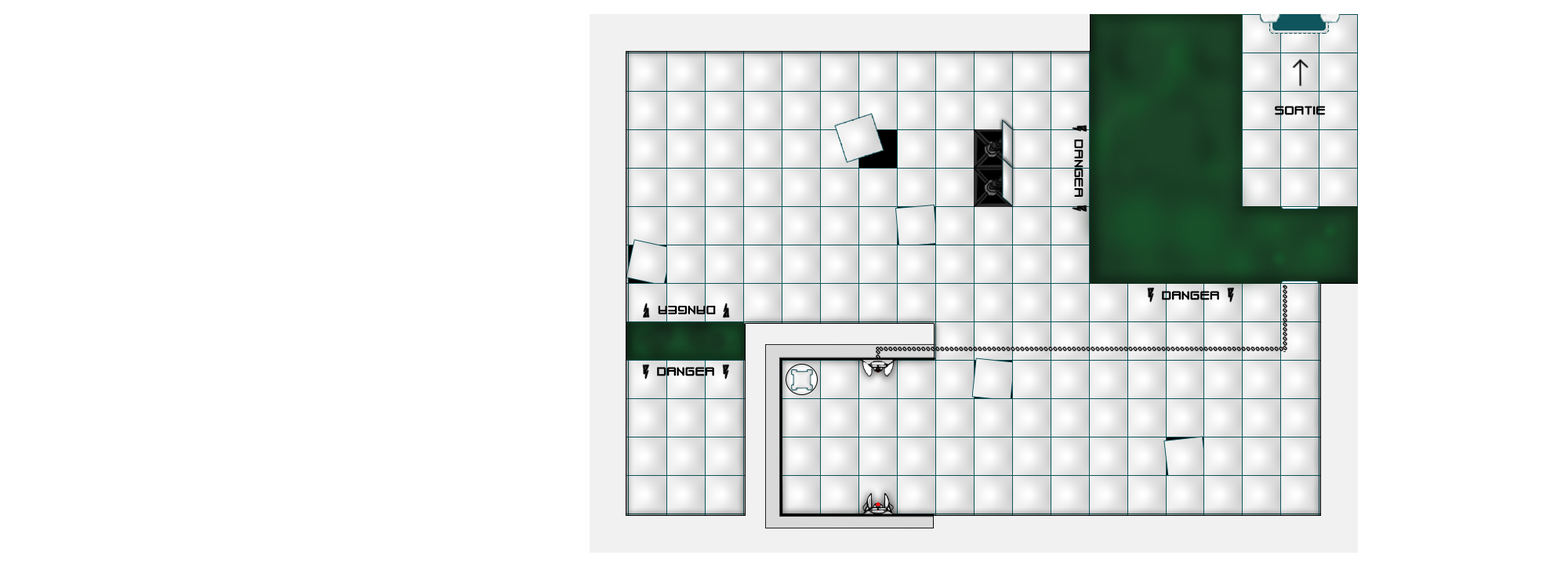
<style>
.page{position:relative;width:1568px;height:588px;background:#ffffff}
.page>*{position:absolute;margin:0}
.t1{font:11px "Weird-Science-NBP";color:#000000;text-transform:uppercase;font-weight:bold}
</style>
<div class="page">
<p class="t1" style="left:1275px;top:106px;width:51px;height:9px">sortie</p>
<p class="t1" style="left:1074px;top:140px;width:9px;height:57px;rotate:90deg">Danger</p>
<p class="t1" style="left:1162px;top:291px;width:57px;height:9px">Danger</p>
<p class="t1" style="left:658px;top:306px;width:58px;height:8px;rotate:180deg">Danger</p>
<p class="t1" style="left:657px;top:367px;width:57px;height:9px">Danger</p>
</div>
